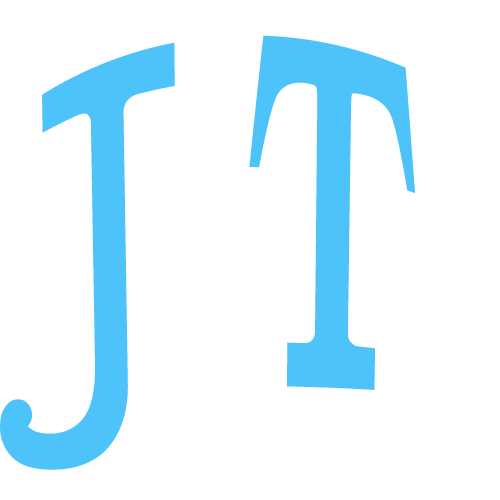
<style>
.page{position:relative;width:500px;height:500px;background:#ffffff}
.page>*{position:absolute;margin:0}
.t1{font:411.1px "NSimSun";letter-spacing:0.15em;color:#4dc3fa;scale:0.93 1}
</style>
<div class="page">
<p class="t1" style="left:0px;top:35px;width:415px;height:435px">JT</p>
</div>
